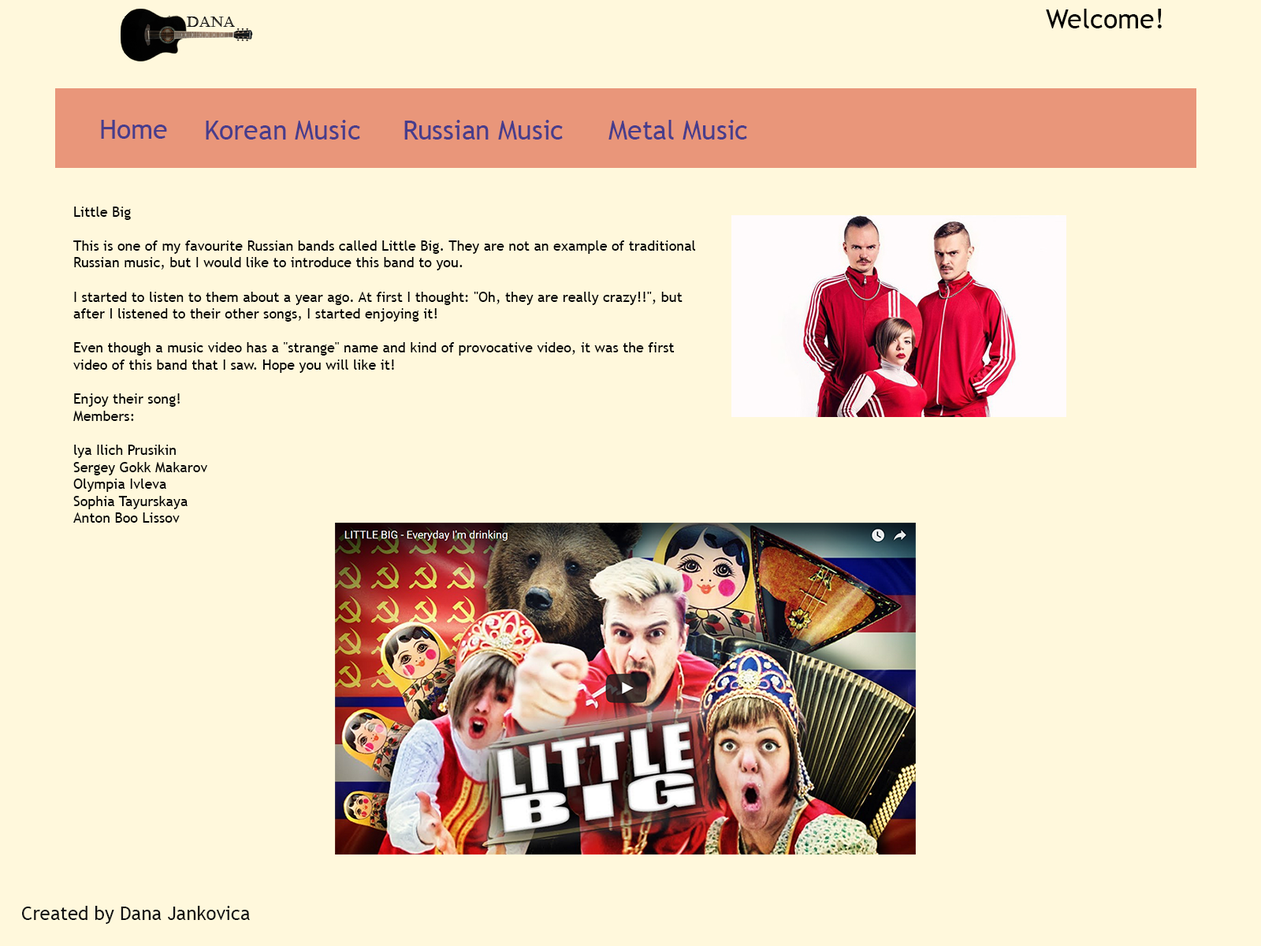
<style>
.page{position:relative;width:1261px;height:946px;background:#fff8dc}
.page>*{position:absolute;margin:0}
.t1{font:26.8px "TrebuchetMS";color:#000000}
.t2{font:26.8px "TrebuchetMS";color:#483d8b}
.t3{font:14.2px "TrebuchetMS";color:#000000}
.t4{font:18.9px "TrebuchetMS";color:#111112}
</style>
<div class="page">
<p class="t1" style="left:1046px;top:9px;width:116px;height:19px">Welcome!</p>
<p class="t2" style="left:101px;top:120px;width:66px;height:19px">Home</p>
<p class="t2" style="left:206px;top:120px;width:154px;height:19px">Korean Music</p>
<p class="t2" style="left:404px;top:120px;width:159px;height:19px">Russian Music</p>
<p class="t2" style="left:608px;top:120px;width:139px;height:19px">Metal Music</p>
<p class="t3" style="left:73px;top:206px;width:623px;height:316px">Little Big<br><br>This is one of my favourite Russian bands called Little Big. They are not an example of traditional <br>Russian music, but I would like to introduce this band to you.<br><br>I started to listen to them about a year ago. At first I thought: "Oh, they are really crazy!!", but <br>after I listened to their other songs, I started enjoying it!<br><br>Even though a music video has a "strange" name and kind of provocative video, it was the first <br>video of this band that I saw. Hope you will like it!<br><br>Enjoy their song!<br>Members:<br><br>lya Ilich Prusikin<br>Sergey Gokk Makarov<br>Olympia Ivleva<br>Sophia Tayurskaya<br>Anton Boo Lissov</p>
<p class="t4" style="left:22px;top:905px;width:228px;height:19px">Created by Dana Jankovica</p>
</div>
